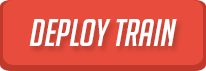
<style>
.page{position:relative;width:206px;height:71px;background:#e74c3c}
.page>*{position:absolute;margin:0}
.t1{font:37.5px "BigNoodleTitling";color:#ffffff;font-style:italic}
</style>
<div class="page">
<p class="t1" style="left:29px;top:19px;width:148px;height:27px">Deploy train</p>
</div>
